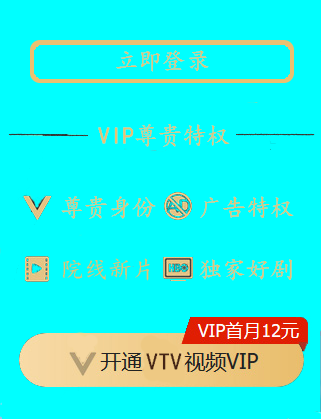
<style>
.page{position:relative;width:321px;height:419px;background:#00ffff}
.page>*{position:absolute;margin:0}
.t1{font:24px "¿¬Ìå";color:#eac171}
.t2{font:24px "¿¬Ìå";color:#452415}
</style>
<div class="page">
<p class="t1" style="left:116px;top:50px;width:93px;height:22px">立即登录</p>
<p class="t1" style="left:98px;top:124px;width:132px;height:23px">VIP尊贵特权</p>
<p class="t1" style="left:61px;top:196px;width:95px;height:23px">尊贵身份</p>
<p class="t1" style="left:200px;top:196px;width:94px;height:22px">广告特权</p>
<p class="t1" style="left:199px;top:259px;width:93px;height:22px">独家好剧</p>
<p class="t2" style="left:146px;top:353px;width:36px;height:17px">VTV</p>
</div>
